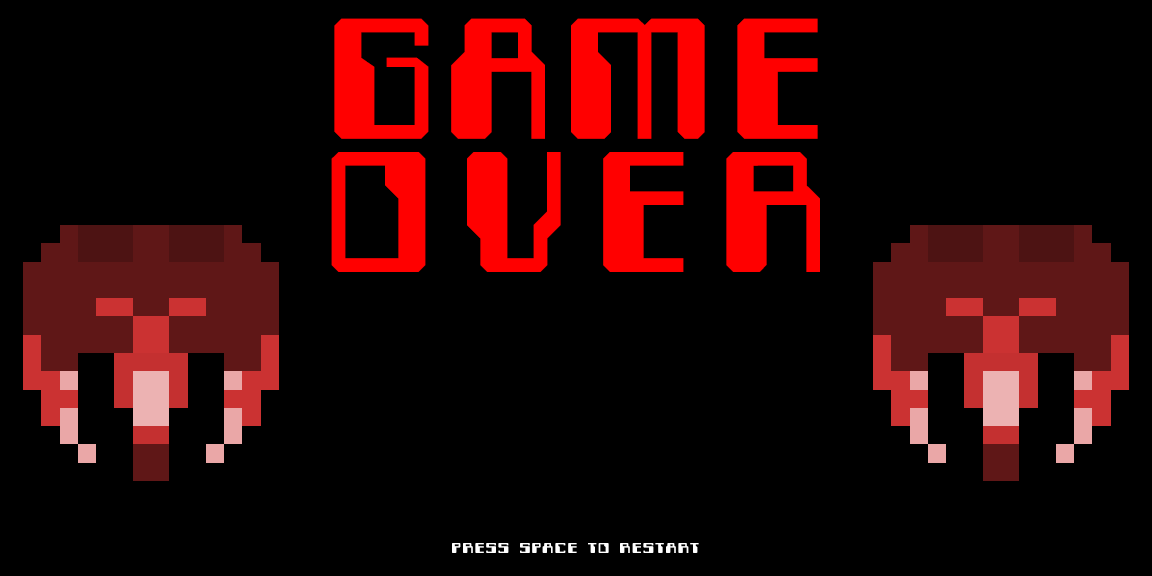
<style>
.page{position:relative;width:1152px;height:576px;background:#000000}
.page>*{position:absolute;margin:0}
.t1{font:200px "Computerfont";letter-spacing:0.035em;color:#ff0000}
.t2{font:200px "Computerfont";letter-spacing:0.115em;color:#ff0000}
.t3{font:17px "Computerfont";letter-spacing:0.035em;color:#ffffff;scale:1.23 1}
</style>
<div class="page">
<p class="t1" style="left:334px;top:18px;width:484px;height:121px">GAME</p>
<p class="t2" style="left:331px;top:152px;width:489px;height:120px">OVER</p>
<p class="t3" style="left:452px;top:543px;width:247px;height:10px">PRESS SPACE TO RESTART</p>
</div>
